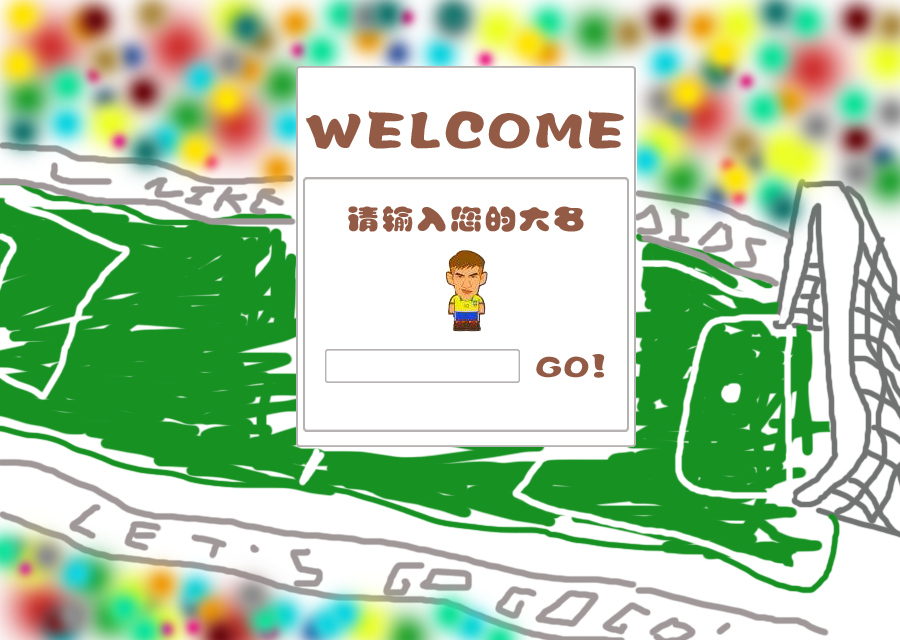
<style>
.page{position:relative;width:900px;height:640px;background:#ffffff}
.page>*{position:absolute;margin:0}
.t1{font:48px "Jpangtouyu";letter-spacing:0.075em;color:#935b45;scale:1.14 1}
.t2{font:28px "Jpangtouyu";letter-spacing:0.075em;color:#935b45;scale:1.14 1}
</style>
<div class="page">
<p class="t1" style="left:306px;top:110px;width:318px;height:39px">WELCOME</p>
<p class="t2" style="left:348px;top:206px;width:236px;height:26px">请输入您的大名</p>
<p class="t2" style="left:536px;top:354px;width:69px;height:24px">GO!</p>
</div>
